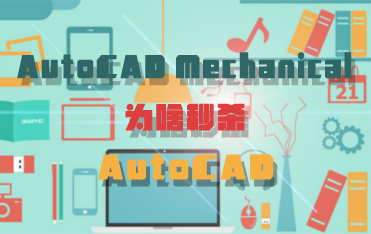
<style>
.page{position:relative;width:371px;height:234px}
.page>*{position:absolute;margin:0}
.t1{font:26px "MFJinHei_Noncommercial-Regular";letter-spacing:0.1em;color:#2f6767;scale:0.91 1}
.t2{font:28px "MFJinHei_Noncommercial-Regular";letter-spacing:0.1em;color:#de3e3e}
.t3{font:28px "MFJinHei_Noncommercial-Regular";letter-spacing:0.1em;color:#f6b144}
</style>
<div class="page">
<p class="t1" style="left:17px;top:52px;width:335px;height:27px">AutoCAD Mechanical</p>
<p class="t2" style="left:125px;top:103px;width:120px;height:28px">为啥秒杀</p>
<p class="t3" style="left:98px;top:153px;width:176px;height:27px">AutoCAD</p>
</div>
